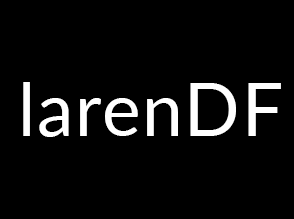
<style>
.page{position:relative;width:294px;height:219px;background:#000000}
.page>*{position:absolute;margin:0}
.t1{font:73px "Lato-Regular";letter-spacing:0.025em;color:#ffffff}
</style>
<div class="page">
<p class="t1" style="left:23px;top:82px;width:258px;height:55px">larenDF</p>
</div>
